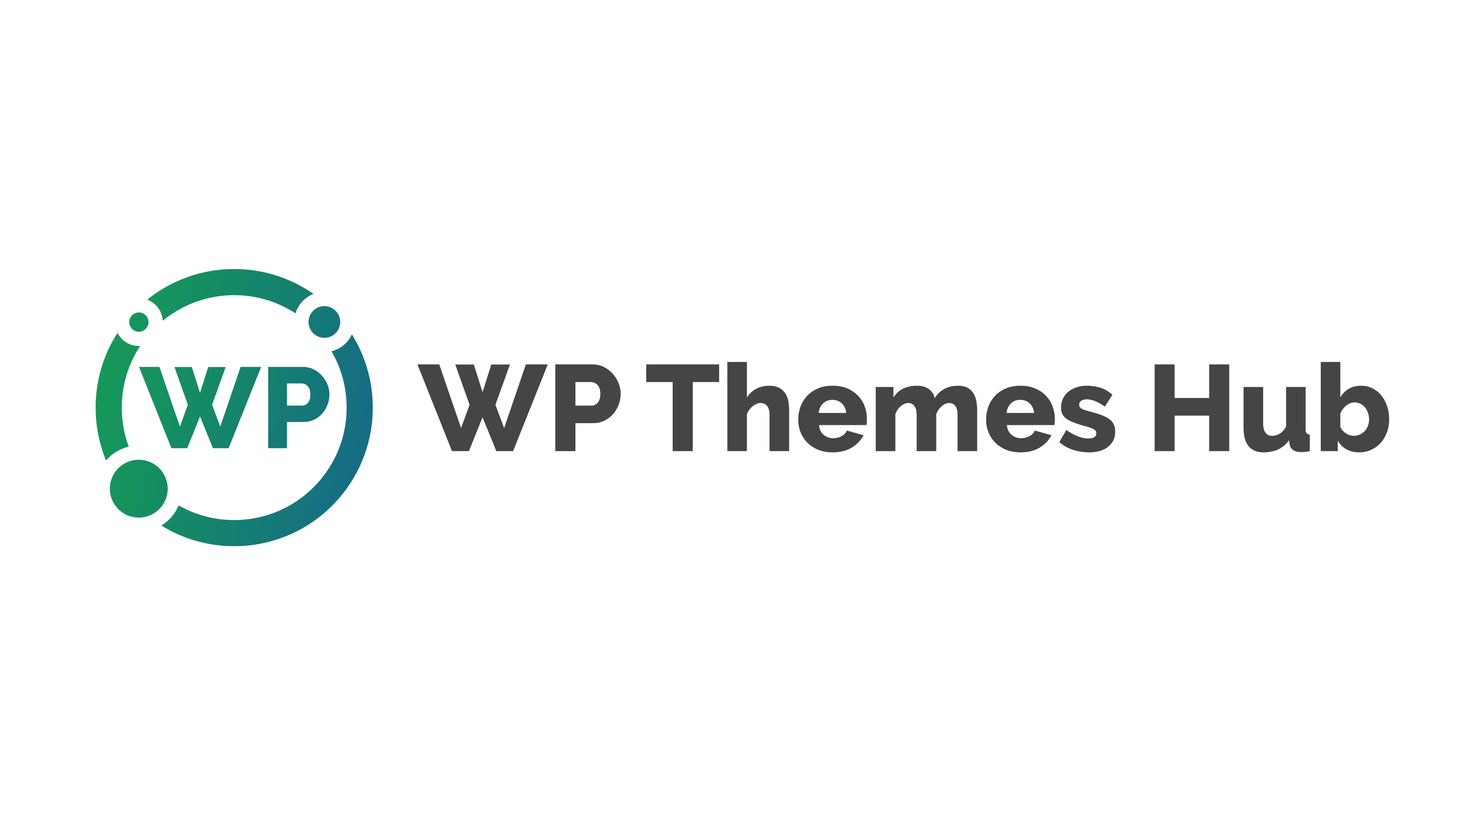
<style>
.page{position:relative;width:1465px;height:814px;background:#ffffff}
.page>*{position:absolute;margin:0}
.t1{font:122.1px "Raleway-ExtraBold";color:#454545}
</style>
<div class="page">
<p class="t1" style="left:417px;top:362px;width:972px;height:91px">WP Themes Hub</p>
</div>
